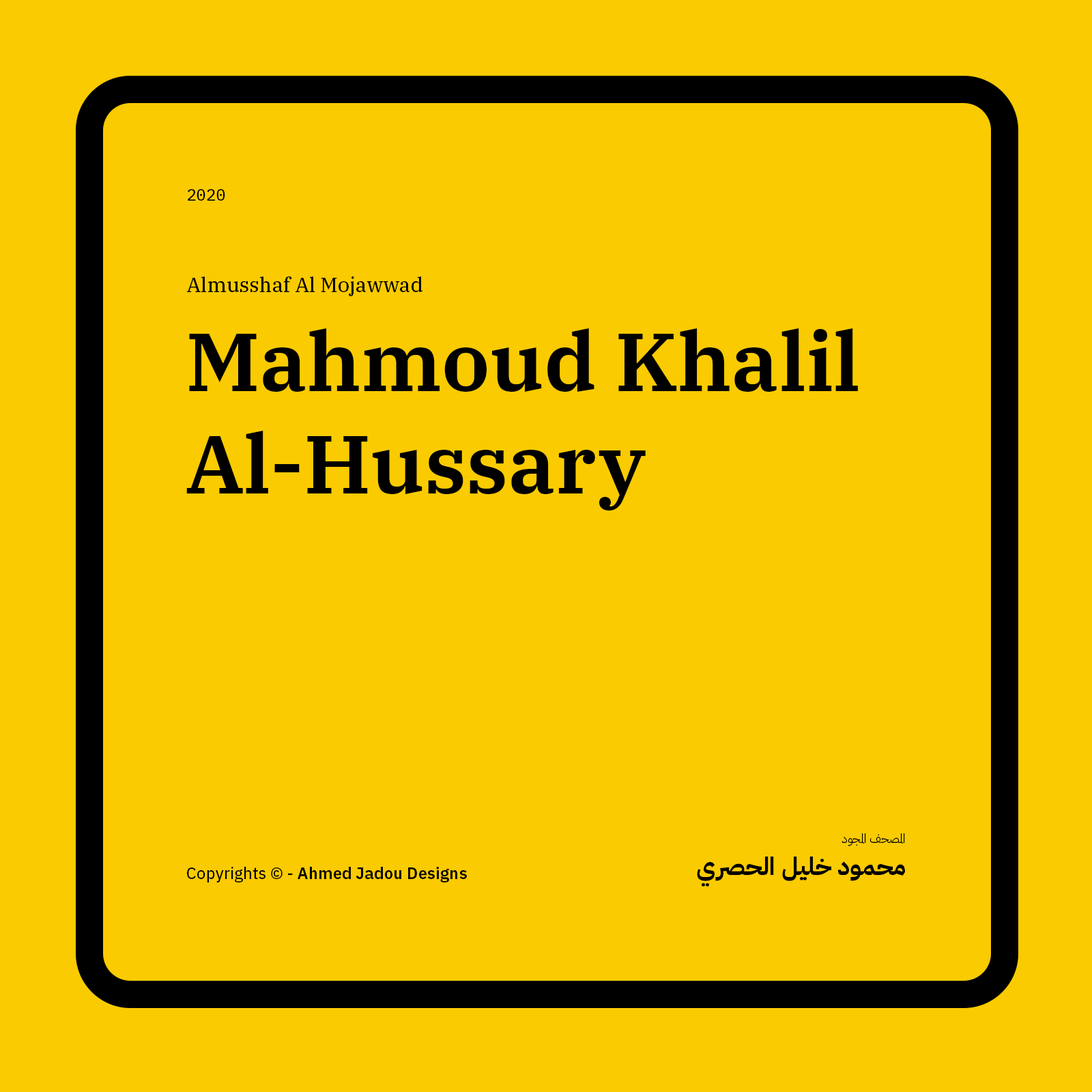
<style>
.page{position:relative;width:1092px;height:1092px;background:#facb00}
.page>*{position:absolute;margin:0}
.t1{font:16.4px "IBMPlexMono-Text";color:#000000}
.t2{font:20.5px "IBMPlexSerif-Text";color:#000000}
.t3{font:81.9px/102.7px "IBMPlexSerif-SemiBold";color:#000000}
.t4{font:12.3px "IBMPlexArabic-Light";color:#000000}
.t5{font:24.6px "IBMPlexArabic-Bold";color:#000000}
.t6{font:16.4px "IBMPlexSans-SemiBold";color:#000000}
.t7{font:16.4px "IBMPlexSans-Text";color:#000000}
</style>
<div class="page">
<p class="t1" style="left:188px;top:189px;width:37px;height:12px">2020</p>
<p class="t2" style="left:187px;top:276px;width:235px;height:20px">Almusshaf Al Mojawwad</p>
<p class="t3" style="left:186px;top:328px;width:672px;height:183px">Mahmoud Khalil Al-Hussary</p>
<p class="t4" style="left:842px;top:833px;width:63px;height:13px">المصحف المجود</p>
<p class="t5" style="left:697px;top:857px;width:208px;height:30px">محمود خليل الحصري</p>
<p class="t6" style="left:187px;top:867px;width:280px;height:15px"><span class="t7">Copyrights © - </span>Ahmed Jadou Designs</p>
</div>
